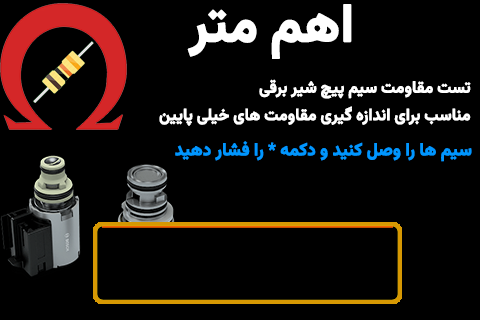
<style>
.page{position:relative;width:480px;height:320px;background:#000000}
.page>*{position:absolute;margin:0}
.t1{font:53.8px "Vazirmatn-Bold";letter-spacing:-0.01em;color:#ffffff;font-weight:bold;scale:0.94 1}
.t2{font:16.5px/27.5px "Vazirmatn-Bold";letter-spacing:-0.01em;color:#ffffff;font-weight:bold;scale:0.94 1}
.t3{font:17.7px "Vazirmatn-Bold";letter-spacing:-0.01em;color:#0096ff;font-weight:bold;scale:0.94 1}
</style>
<div class="page">
<p class="t1" style="left:187px;top:4px;width:165px;height:55px">اهم متر</p>
<p class="t2" style="left:159px;top:79px;width:312px;height:47px;text-align:right">تست مقاومت سیم پیچ شیر برقی<br>مناسب برای اندازه گیری مقاومت های خیلی پایین</p>
<p class="t3" style="left:175px;top:141px;width:297px;height:21px">سیم ها را وصل کنید و دکمه * را فشار دهید</p>
</div>
